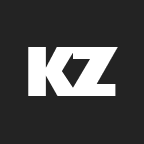
<style>
.page{position:relative;width:144px;height:144px;background:#232323}
.page>*{position:absolute;margin:0}
.t1{font:68px "FuturaBT-ExtraBlack";letter-spacing:-0.09em;color:#ffffff}
</style>
<div class="page">
<p class="t1" style="left:28px;top:47px;width:90px;height:49px">KZ</p>
</div>
